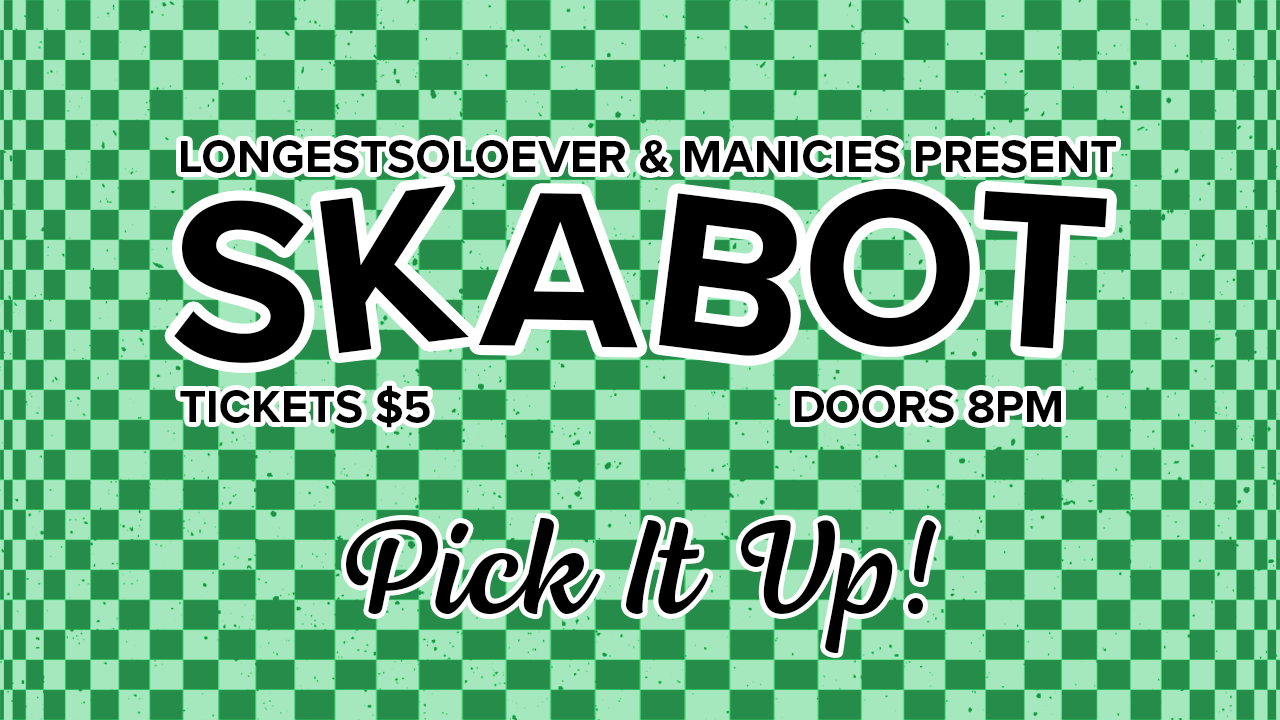
<style>
.page{position:relative;width:1280px;height:720px;background:#258c49}
.page>*{position:absolute;margin:0}
.t1{font:46.9px "ProximaNova-Bold";color:#000000;text-transform:uppercase}
.t2{font:46.7px "ProximaNova-Bold";color:#000000;text-transform:uppercase}
.t3{font:133.3px "LemongrassScript-Regular";color:#000000}
</style>
<div class="page">
<p class="t1" style="left:181px;top:140px;width:935px;height:33px">longestsoloever &amp; Manicies present</p>
<p class="t2" style="left:180px;top:385px;width:250px;height:43px">tickets $5</p>
<p class="t2" style="left:795px;top:390px;width:266px;height:33px">doors 8pm</p>
<p class="t3" style="left:346px;top:517px;width:591px;height:136px">Pick It Up!</p>
</div>
